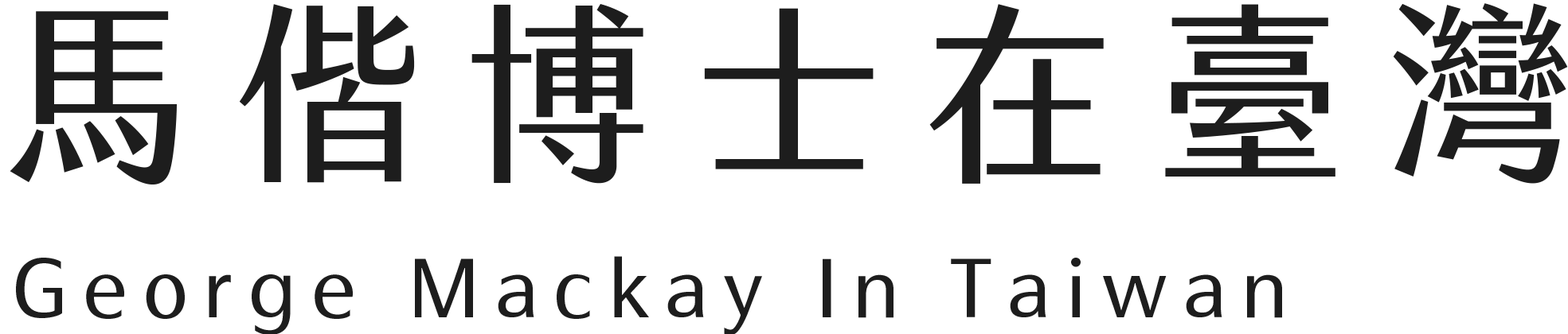
<style>
.page{position:relative;width:1568px;height:334px;background:#ffffff}
.page>*{position:absolute;margin:0}
.t1{font:192.2px "jf-jinxuan-fresh2.2-Medium";letter-spacing:0.2em;color:#1d1d1d}
.t2{font:79.5px "jf-jinxuan-fresh2.2-Medium";letter-spacing:0.2em;color:#1d1d1d}
</style>
<div class="page">
<p class="t1" style="left:10px;top:3px;width:1558px;height:182px">馬偕博士在臺灣</p>
<p class="t2" style="left:16px;top:256px;width:1266px;height:79px">George Mackay In Taiwan</p>
</div>
